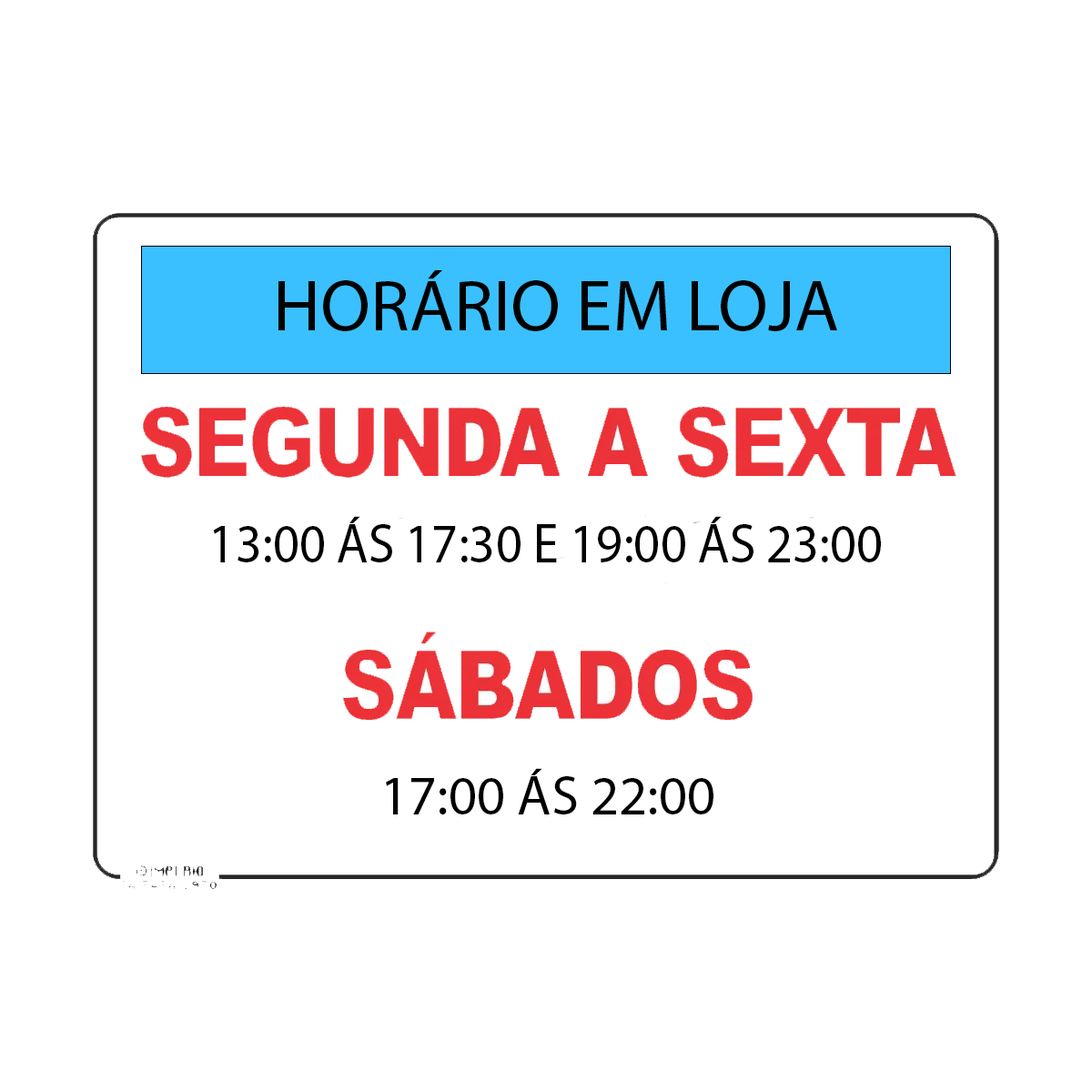
<style>
.page{position:relative;width:1092px;height:1092px;background:#ffffff}
.page>*{position:absolute;margin:0}
.t1{font:72.8px "MyriadPro-Regular";color:#000000}
.t2{font:55.4px "MyriadPro-Regular";color:#000000;scale:0.94 1}
.t3{font:55.5px "MyriadPro-Regular";color:#000000}
</style>
<div class="page">
<p class="t1" style="left:278px;top:270px;width:559px;height:61px">HORÁRIO EM LOJA</p>
<p class="t2" style="left:213px;top:516px;width:668px;height:46px">13:00 ÁS 17:30 E 19:00 ÁS 23:00</p>
<p class="t3" style="left:386px;top:768px;width:327px;height:46px">17:00 ÁS 22:00</p>
</div>
